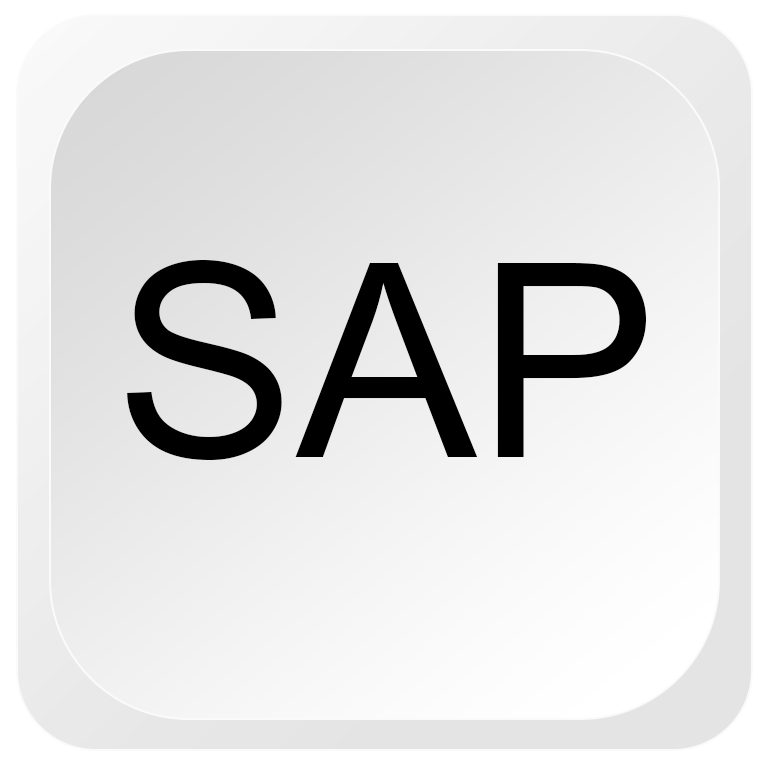
<style>
.page{position:relative;width:768px;height:768px}
.page>*{position:absolute;margin:0}
.t1{font:271px "ArialMT";color:#000000}
</style>
<div class="page">
<p class="t1" style="left:127px;top:260px;width:519px;height:200px">SAP</p>
</div>
